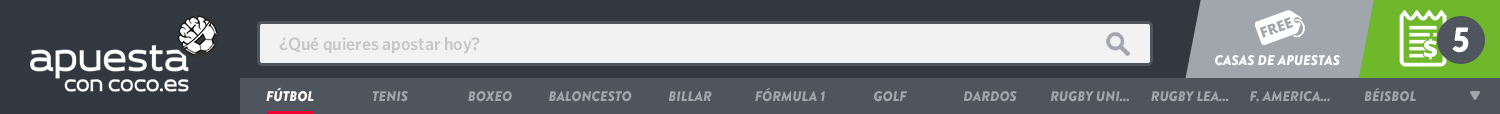
<style>
.page{position:relative;width:1500px;height:114px;background:#313840}
.page>*{position:absolute;margin:0}
.t1{font:18px "Whitney-Semibold";color:#c6c7c8}
.t2{font:14px "BrandonGrotesque-BlackItalic";color:#ffffff;text-transform:uppercase}
.t3{font:14px "BrandonGrotesque-BlackItalic";color:#a1a6ac;text-transform:uppercase}
</style>
<div class="page">
<p class="t1" style="left:279px;top:37px;width:201px;height:17px">¿Qué quieres apostar hoy?</p>
<p class="t2" style="left:266px;top:87px;width:48px;height:15px">Fútbol</p>
<p class="t3" style="left:755px;top:87px;width:70px;height:15px">Fórmula 1</p>
<p class="t3" style="left:1364px;top:88px;width:52px;height:14px">Béisbol</p>
<p class="t3" style="left:372px;top:91px;width:36px;height:11px">Tenis</p>
<p class="t3" style="left:468px;top:91px;width:44px;height:11px">Boxeo</p>
<p class="t3" style="left:549px;top:91px;width:83px;height:11px">Baloncesto</p>
<p class="t3" style="left:669px;top:91px;width:43px;height:10px">Billar</p>
<p class="t3" style="left:874px;top:91px;width:33px;height:11px">Golf</p>
<p class="t3" style="left:963px;top:91px;width:54px;height:11px">Dardos</p>
<p class="t3" style="left:1051px;top:91px;width:78px;height:11px">RUGBY UNI...</p>
<p class="t3" style="left:1151px;top:91px;width:78px;height:11px">RUGBY LEa...</p>
<p class="t3" style="left:1250px;top:91px;width:80px;height:11px">F. America...</p>
</div>
